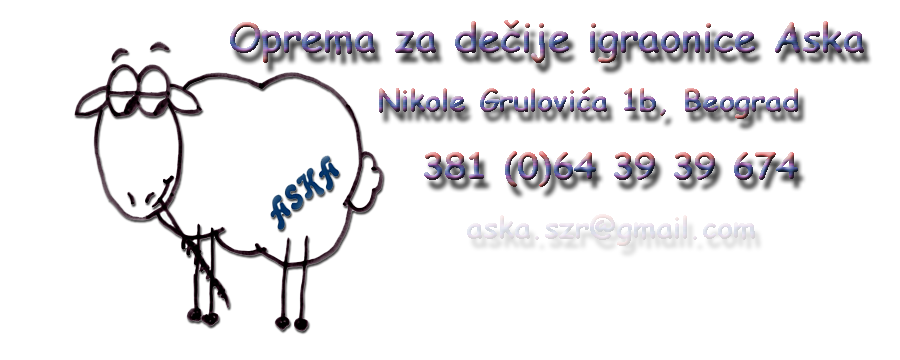
<style>
.page{position:relative;width:900px;height:360px;background:#ffffff}
.page>*{position:absolute;margin:0}
.t1{font:40px "ComicSansMS-Bold"}
.t2{font:30px "ComicSansMS-Bold"}
.t3{font:36px "ComicSansMS-Bold"}
.t4{font:30px "ComicSansMS-Bold";color:#e2dfea}
</style>
<div class="page">
<p class="t1" style="left:230px;top:20px;width:634px;height:43px">Oprema za dečije igraonice Aska</p>
<p class="t2" style="left:379px;top:87px;width:419px;height:32px">Nikole Grulovića 1b, Beograd</p>
<p class="t3" style="left:424px;top:151px;width:374px;height:36px">381 (0)64 39 39 674</p>
<p class="t4" style="left:467px;top:214px;width:288px;height:32px">aska.szr@gmail.com</p>
</div>
